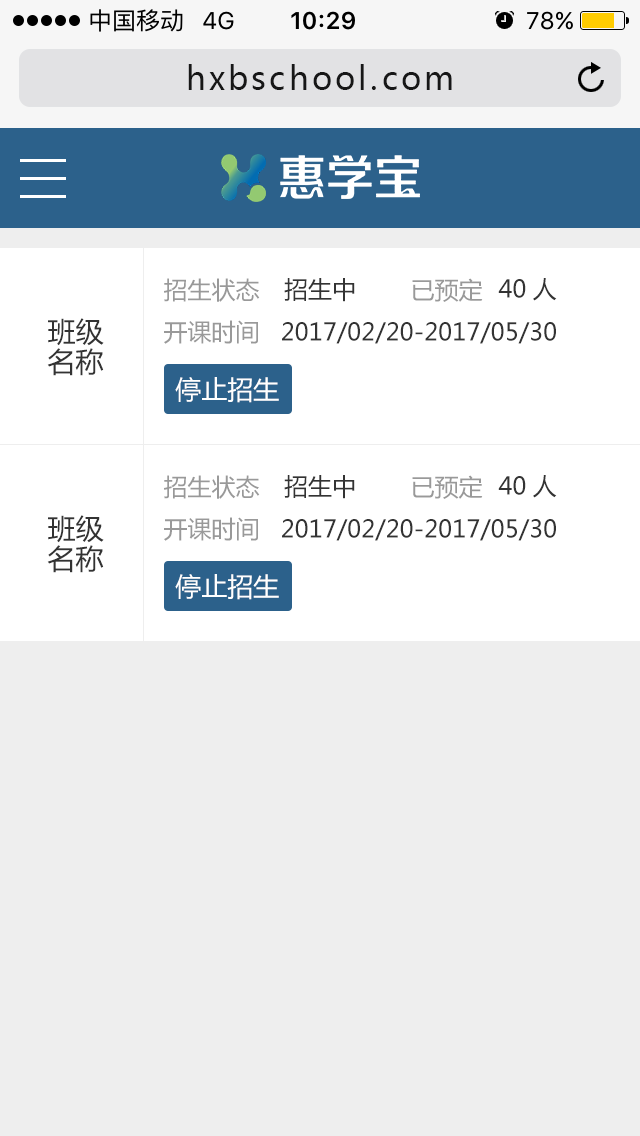
<style>
.page{position:relative;width:640px;height:1136px;background:#eeeeee}
.page>*{position:absolute;margin:0}
.t1{font:32px "MicrosoftYaHei";letter-spacing:0.1em;color:#171717}
.t2{font:24px "MicrosoftYaHei";color:#999999}
.t3{font:24px "MicrosoftYaHei";color:#333333}
.t4{font:28px/30px "MicrosoftYaHei";color:#333333}
.t5{font:26px "MicrosoftYaHei";color:#ffffff}
</style>
<div class="page">
<p class="t1" style="left:188px;top:64px;width:264px;height:26px">hxbschool.com</p>
<p class="t2" style="left:164px;top:278px;width:96px;height:24px">招生状态</p>
<p class="t3" style="left:284px;top:278px;width:71px;height:24px">招生中</p>
<p class="t2" style="left:412px;top:278px;width:71px;height:24px">已预定</p>
<p class="t3" style="left:498px;top:278px;width:59px;height:23px">40人</p>
<p class="t4" style="left:47px;top:318px;width:57px;height:58px">班级<br>名称</p>
<p class="t3" style="left:164px;top:320px;width:392px;height:24px"><span class="t2">开课时间   </span>2017/02/20-2017/05/30</p>
<p class="t5" style="left:175px;top:377px;width:104px;height:26px">停止招生</p>
<p class="t2" style="left:164px;top:475px;width:96px;height:24px">招生状态</p>
<p class="t3" style="left:284px;top:475px;width:71px;height:24px">招生中</p>
<p class="t2" style="left:412px;top:475px;width:71px;height:24px">已预定</p>
<p class="t3" style="left:498px;top:475px;width:59px;height:23px">40人</p>
<p class="t4" style="left:47px;top:515px;width:57px;height:58px">班级<br>名称</p>
<p class="t3" style="left:164px;top:517px;width:392px;height:24px"><span class="t2">开课时间   </span>2017/02/20-2017/05/30</p>
<p class="t5" style="left:175px;top:574px;width:104px;height:26px">停止招生</p>
</div>
